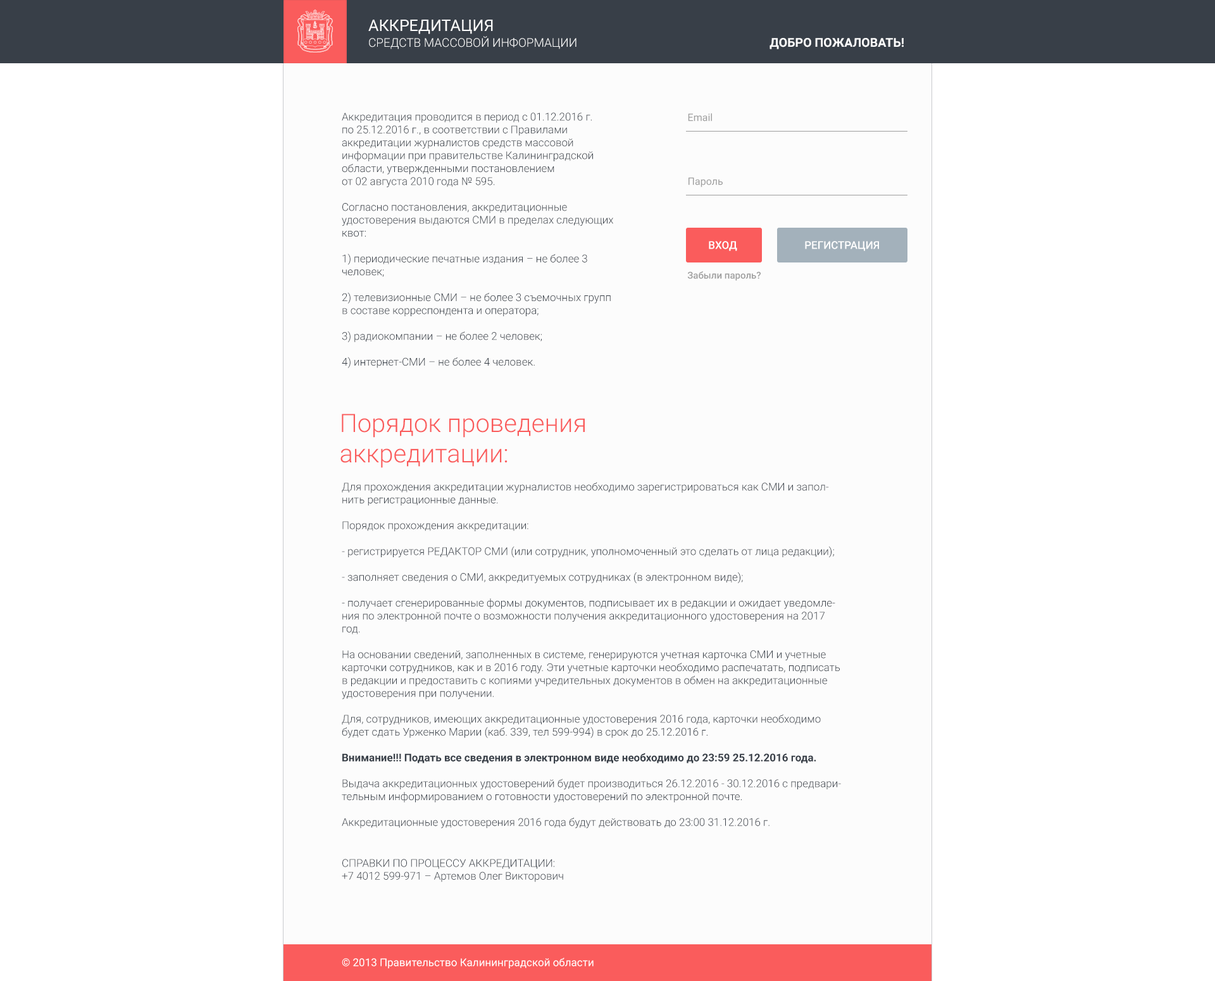
<style>
.page{position:relative;width:1215px;height:981px;background:#ffffff}
.page>*{position:absolute;margin:0}
.t1{font:12px/15.8px "Roboto-Light";color:#fcfcfc;text-transform:uppercase}
.t2{font:16px/15.8px "Roboto-Regular";color:#fcfcfc;text-transform:uppercase}
.t3{font:12.4px "Roboto-Bold";color:#ffffff;text-transform:uppercase}
.t4{font:10.8px "Roboto-Light";color:#383f48}
.t5{font:10.1px "Roboto-Regular";color:#9e9e9e}
.t6{font:10.8px "Roboto-Medium";color:#ffffff}
.t7{font:10.8px "Roboto-Medium";color:#ffffff;text-transform:uppercase}
.t8{font:9.5px "Roboto-Medium";color:#9e9e9e}
.t9{font:25.3px "Roboto-Light";color:#fa5c5c}
.t10{font:10.8px "Roboto-Bold";color:#383f48}
.t11{font:10.8px "Roboto-Light";color:#383f48;text-transform:uppercase}
.t12{font:10.8px "Roboto-Regular";color:#ffffff}
</style>
<div class="page">
<p class="t1" style="left:368px;top:20px;width:208px;height:29px"><span class="t2">Аккредитация <br></span>средств массовой информации</p>
<p class="t3" style="left:769px;top:38px;width:135px;height:11px">добро пожаловать!</p>
<p class="t4" style="left:342px;top:113px;width:271px;height:255px">Аккредитация проводится в период с 01.12.2016 г. <br>по 25.12.2016 г., в соответствии с Правилами аккредитации журналистов средств массовой информации при правительстве Калининградской области, утвержденными постановлением <br>от 02 августа 2010 года № 595.<br><br>Согласно постановления, аккредитационные удостоверения выдаются СМИ в пределах следующих квот:<br><br>1) периодические печатные издания – не более 3 человек;<br><br>2) телевизионные СМИ – не более 3 съемочных групп <br>в составе корреспондента и оператора;<br><br>3) радиокомпании – не более 2 человек;<br><br>4) интернет-СМИ – не более 4 человек.</p>
<p class="t5" style="left:688px;top:113px;width:24px;height:8px">Email</p>
<p class="t5" style="left:688px;top:177px;width:35px;height:10px">Пароль</p>
<p class="t6" style="left:709px;top:241px;width:28px;height:10px">ВХОД</p>
<p class="t7" style="left:805px;top:241px;width:74px;height:10px">регистрация</p>
<p class="t8" style="left:687px;top:271px;width:74px;height:10px">Забыли пароль?</p>
<p class="t9" style="left:340px;top:414px;width:245px;height:54px">Порядок проведения <br>аккредитации:</p>
<p class="t4" style="left:342px;top:482px;width:499px;height:347px">Для прохождения аккредитации журналистов необходимо зарегистрироваться как СМИ и заполнить регистрационные данные.<br><br>Порядок прохождения аккредитации:<br><br>- регистрируется РЕДАКТОР СМИ (или сотрудник, уполномоченный это сделать от лица редакции);<br><br>- заполняет сведения о СМИ, аккредитуемых сотрудниках (в электронном виде);<br><br>- получает сгенерированные формы документов, подписывает их в редакции и ожидает уведомления по электронной почте о возможности получения аккредитационного удостоверения на 2017 год.<br><br>На основании сведений, заполненных в системе, генерируются учетная карточка СМИ и учетные карточки сотрудников, как и в 2016 году. Эти учетные карточки необходимо распечатать, подписать в редакции и предоставить с копиями учредительных документов в обмен на аккредитационные удостоверения при получении.<br><br>Для, сотрудников, имеющих аккредитационные удостоверения 2016 года, карточки необходимо будет сдать Урженко Марии (каб. 339, тел 599-994) в срок до 25.12.2016 г.<br><br><span class="t10">Внимание!!! Подать все сведения в электронном виде необходимо до 23:59 25.12.2016 года.<br></span><br>Выдача аккредитационных удостоверений будет производиться 26.12.2016 - 30.12.2016 с предварительным информированием о готовности удостоверений по электронной почте.<br><br>Аккредитационные удостоверения 2016 года будут действовать до 23:00 31.12.2016 г.</p>
<p class="t11" style="left:342px;top:859px;width:221px;height:24px">Справки по процессу аккредитации: <br>+7 4012 599-971 <span class="t4">– Артемов Олег Викторович</span></p>
<p class="t12" style="left:342px;top:958px;width:252px;height:11px">© 2013 Правительство Калининградской области</p>
</div>
